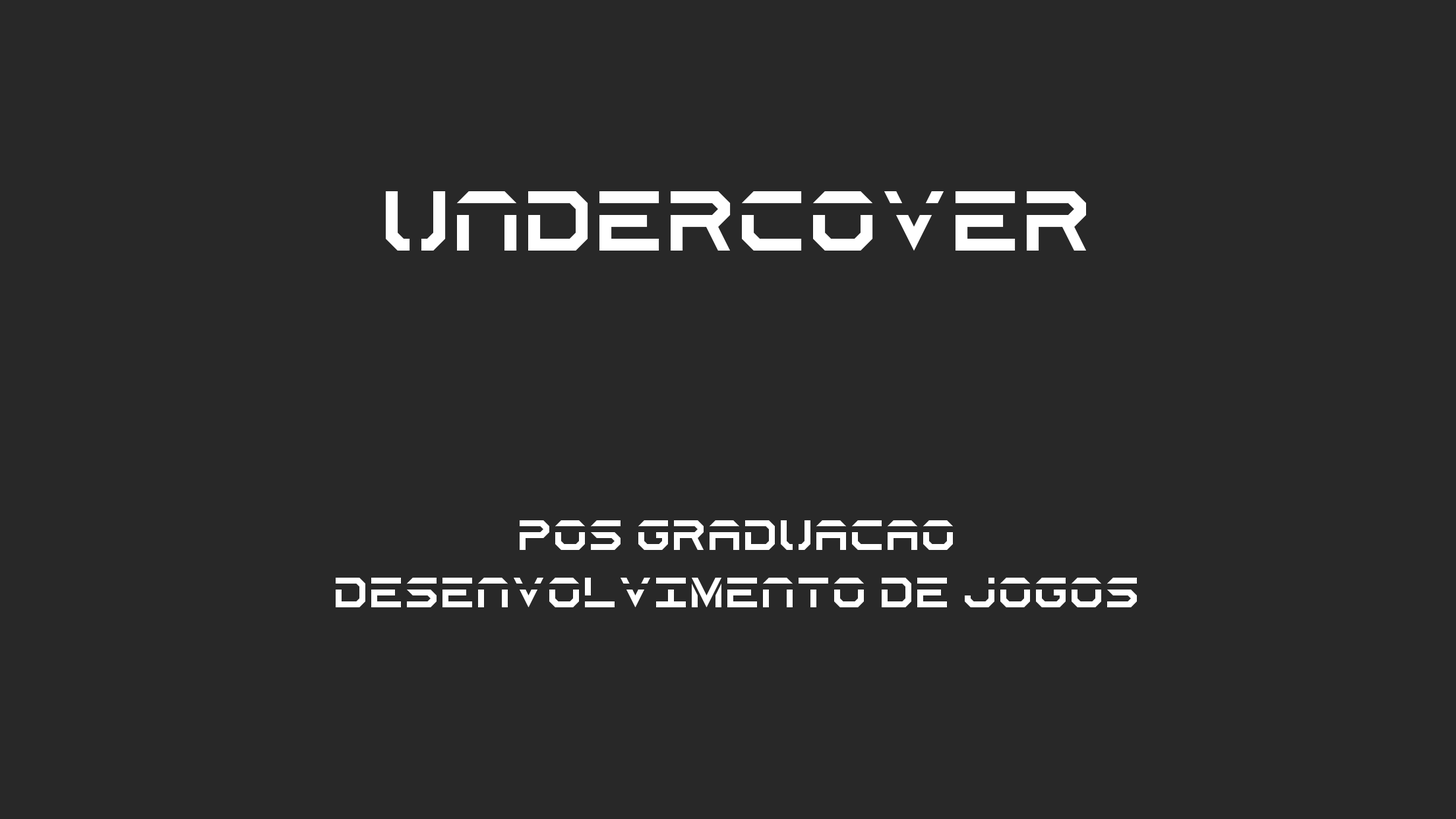
<style>
.page{position:relative;width:1456px;height:819px;background:#282828}
.page>*{position:absolute;margin:0}
.t1{font:95px "Secrets-Stencil";color:#ffffff}
.t2{font:47.5px "Secrets-Stencil";color:#ffffff}
</style>
<div class="page">
<p class="t1" style="left:386px;top:191px;width:700px;height:60px">Undercover</p>
<p class="t2" style="left:336px;top:520px;width:801px;height:87px;text-align:center">Pos Graduacao<br>desenvolvimento de jogos</p>
</div>
